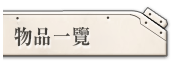
<style>
.page{position:relative;width:174px;height:67px;background:#ffffff}
.page>*{position:absolute;margin:0}
.t1{font:20px "RyuminPr6N-ExBold";letter-spacing:0.075em;color:#625d56;scale:0.9 1}
</style>
<div class="page">
<p class="t1" style="left:14px;top:26px;width:76px;height:21px">物品一覽</p>
</div>
